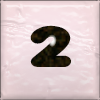
<style>
.page{position:relative;width:100px;height:100px}
.page>*{position:absolute;margin:0}
.t1{font:56px "Anja-Eliane-Nornal";letter-spacing:-0.02em;color:#0b0a0a;scale:1.25 1}
</style>
<div class="page">
<p class="t1" style="left:30px;top:25px;width:41px;height:42px">2</p>
</div>
